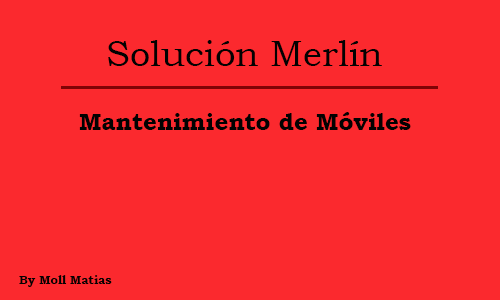
<style>
.page{position:relative;width:500px;height:300px;background:#fb292e}
.page>*{position:absolute;margin:0}
.t1{font:36px "BookmanOldStyle";color:#020202}
.t2{font:24px "BookmanOldStyle-Bold";color:#020202}
.t3{font:12px "BookmanOldStyle-Bold";color:#020202}
</style>
<div class="page">
<p class="t1" style="left:108px;top:40px;width:274px;height:26px">Solución Merlín</p>
<p class="t2" style="left:79px;top:112px;width:332px;height:18px">Mantenimiento de Móviles</p>
<p class="t3" style="left:19px;top:275px;width:93px;height:12px">By Moll Matias</p>
</div>
